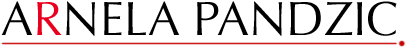
<style>
.page{position:relative;width:406px;height:47px;background:#ffffff}
.page>*{position:absolute;margin:0}
.t1{font:48px "Optima-Regular";color:#000000}
.t2{font:48px "Optima-Regular";color:#e9001f}
</style>
<div class="page">
<p class="t1" style="left:1px;top:1px;width:396px;height:35px">ARNELA PANDZIC</p>
<p class="t2" style="left:37px;top:2px;width:25px;height:33px">R</p>
</div>
